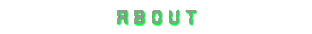
<style>
.page{position:relative;width:312px;height:34px;background:#ffffff}
.page>*{position:absolute;margin:0}
.t1{font:22px "DS-Digital-Bold";letter-spacing:0.27em;color:#999999;text-transform:uppercase}
</style>
<div class="page">
<p class="t1" style="left:117px;top:9px;width:79px;height:16px">ABOUT</p>
</div>
